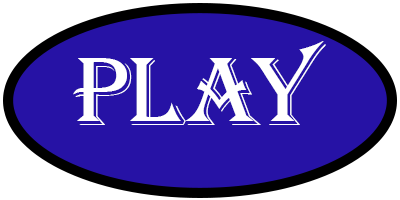
<style>
.page{position:relative;width:400px;height:200px;background:#2612a5}
.page>*{position:absolute;margin:0}
.t1{font:100px "Algerian";color:#ffffff}
</style>
<div class="page">
<p class="t1" style="left:73px;top:41px;width:253px;height:84px">Play</p>
</div>
